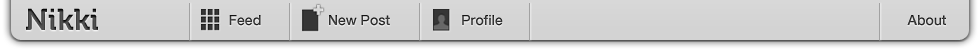
<style>
.page{position:relative;width:979px;height:51px;background:#d3d3d3}
.page>*{position:absolute;margin:0}
.t1{font:30px "Museo-700";color:#515151}
.t2{font:14px "HelveticaNeue-Medium";color:#2d2d2d}
.t3{font:14px "HelveticaNeue-Medium";color:#313131}
.t4{font:14px "HelveticaNeue-Medium";color:#303030}
.t5{font:14px "HelveticaNeue-Medium";color:#333333}
</style>
<div class="page">
<p class="t1" style="left:26px;top:8px;width:72px;height:22px">Nikki</p>
<p class="t2" style="left:229px;top:15px;width:32px;height:11px">Feed</p>
<p class="t3" style="left:329px;top:15px;width:61px;height:11px">New Post</p>
<p class="t4" style="left:462px;top:15px;width:41px;height:11px">Profile</p>
<p class="t5" style="left:907px;top:15px;width:39px;height:11px">About</p>
</div>
